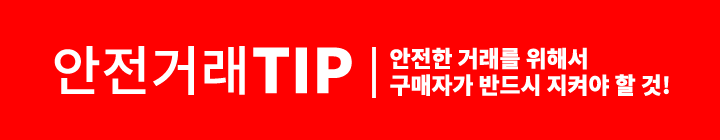
<style>
.page{position:relative;width:720px;height:140px;background:#ff0000}
.page>*{position:absolute;margin:0}
.t1{font:53.9px "NotoSansCJKkr-Medium";color:#ffffff}
.t2{font:61.1px "NotoSansCJKkr-Black";color:#ffffff}
.t3{font:22.8px "NotoSansCJKkr-Black";color:#ffffff}
</style>
<div class="page">
<p class="t1" style="left:54px;top:46px;width:191px;height:49px">안전거래</p>
<p class="t2" style="left:253px;top:47px;width:99px;height:47px">TIP</p>
<p class="t3" style="left:390px;top:47px;width:197px;height:23px">안전한 거래를 위해서</p>
<p class="t3" style="left:390px;top:74px;width:279px;height:22px">구매자가 반드시 지켜야 할 것!</p>
</div>
